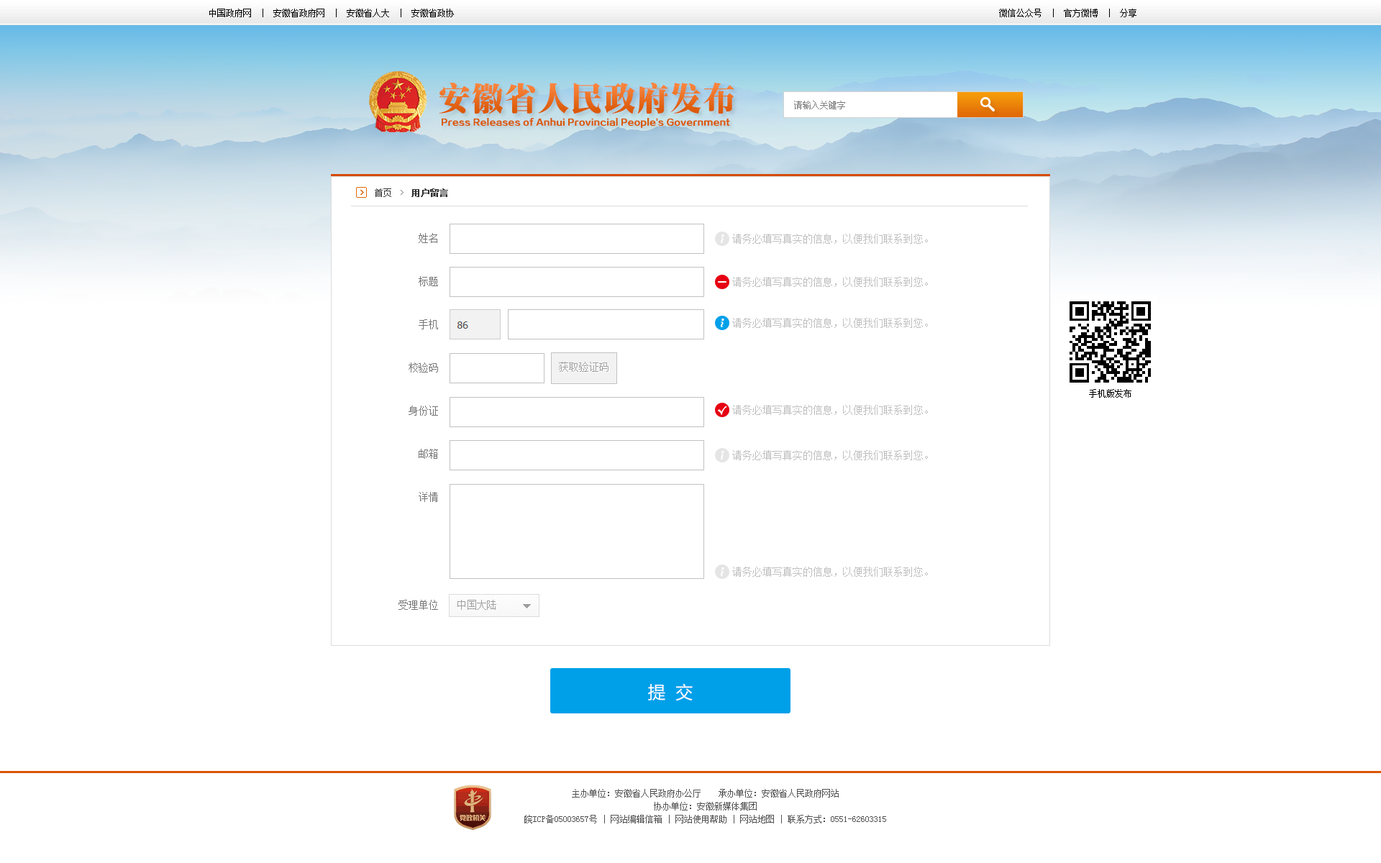
<style>
.page{position:relative;width:1381px;height:863px;background:#ffffff}
.page>*{position:absolute;margin:0}
.t1{font:8.6px "SimSun";color:#000000}
.t2{font:32.4px "SungtiEG-Ultra-GB";letter-spacing:0.025em}
.t3{font:8.6px "SimSun";color:#7d7d7d}
.t4{font:8.6px "FZZDHJW--GB1-0";color:#da5705}
.t5{font:8.6px "SimSun";color:#313131;font-weight:bold}
.t6{font:8.6px "SimSun";color:#313131}
.t7{font:10.1px/21.6px "SimSun";color:#767676}
.t8{font:10.1px "SimSun";color:#bfbfbf}
.t9{font:10.1px "BerlinSansFB-Reg";color:#ffffff}
.t10{font:17.3px "MicrosoftYaHei";color:#ffffff}
.t11{font:8.6px/12.9px "SimSun";color:#535353}
</style>
<div class="page">
<p class="t1" style="left:209px;top:9px;width:245px;height:8px">中国政府网  |  安徽省政府网  |  安徽省人大  |  安徽省政协</p>
<p class="t1" style="left:999px;top:9px;width:138px;height:8px">微信公众号  |  官方微博  |  分享</p>
<p class="t2" style="left:439px;top:83px;width:296px;height:31px">安徽省人民政府发布</p>
<p class="t3" style="left:794px;top:101px;width:51px;height:8px">请输入关键字</p>
<p class="t4" style="left:442px;top:118px;width:288px;height:10px">Press Releases of Anhui Provincial People's Government</p>
<p class="t5" style="left:375px;top:188px;width:73px;height:9px"><span class="t6">首页     </span>用户留言</p>
<p class="t7" style="left:399px;top:233px;width:39px;height:377px;text-align:right">姓名<br><br>标题<br><br>手机<br><br>校验码<br><br>身份证<br><br>邮箱<br><br>详情<br><br><br><br><br>受理单位</p>
<p class="t8" style="left:732px;top:234px;width:196px;height:10px">请务必填写真实的信息，以便我们联系到您。</p>
<p class="t8" style="left:732px;top:277px;width:196px;height:10px">请务必填写真实的信息，以便我们联系到您。</p>
<p class="t8" style="left:732px;top:318px;width:196px;height:10px">请务必填写真实的信息，以便我们联系到您。</p>
<p class="t1" style="left:1089px;top:389px;width:43px;height:9px">手机版发布</p>
<p class="t9" style="left:718px;top:406px;width:9px;height:9px">√</p>
<p class="t8" style="left:732px;top:405px;width:196px;height:10px">请务必填写真实的信息，以便我们联系到您。</p>
<p class="t8" style="left:732px;top:450px;width:196px;height:10px">请务必填写真实的信息，以便我们联系到您。</p>
<p class="t8" style="left:732px;top:567px;width:196px;height:10px">请务必填写真实的信息，以便我们联系到您。</p>
<p class="t10" style="left:648px;top:683px;width:45px;height:18px">提  交</p>
<p class="t11" style="left:524px;top:789px;width:362px;height:35px;text-align:center">主办单位：安徽省人民政府办公厅    承办单位：安徽省人民政府网站<br>协办单位：安徽新媒体集团<br>皖ICP备05003657号 | 网站编辑信箱 | 网站使用帮助 | 网站地图 | 联系方式：0551-62603315</p>
</div>
